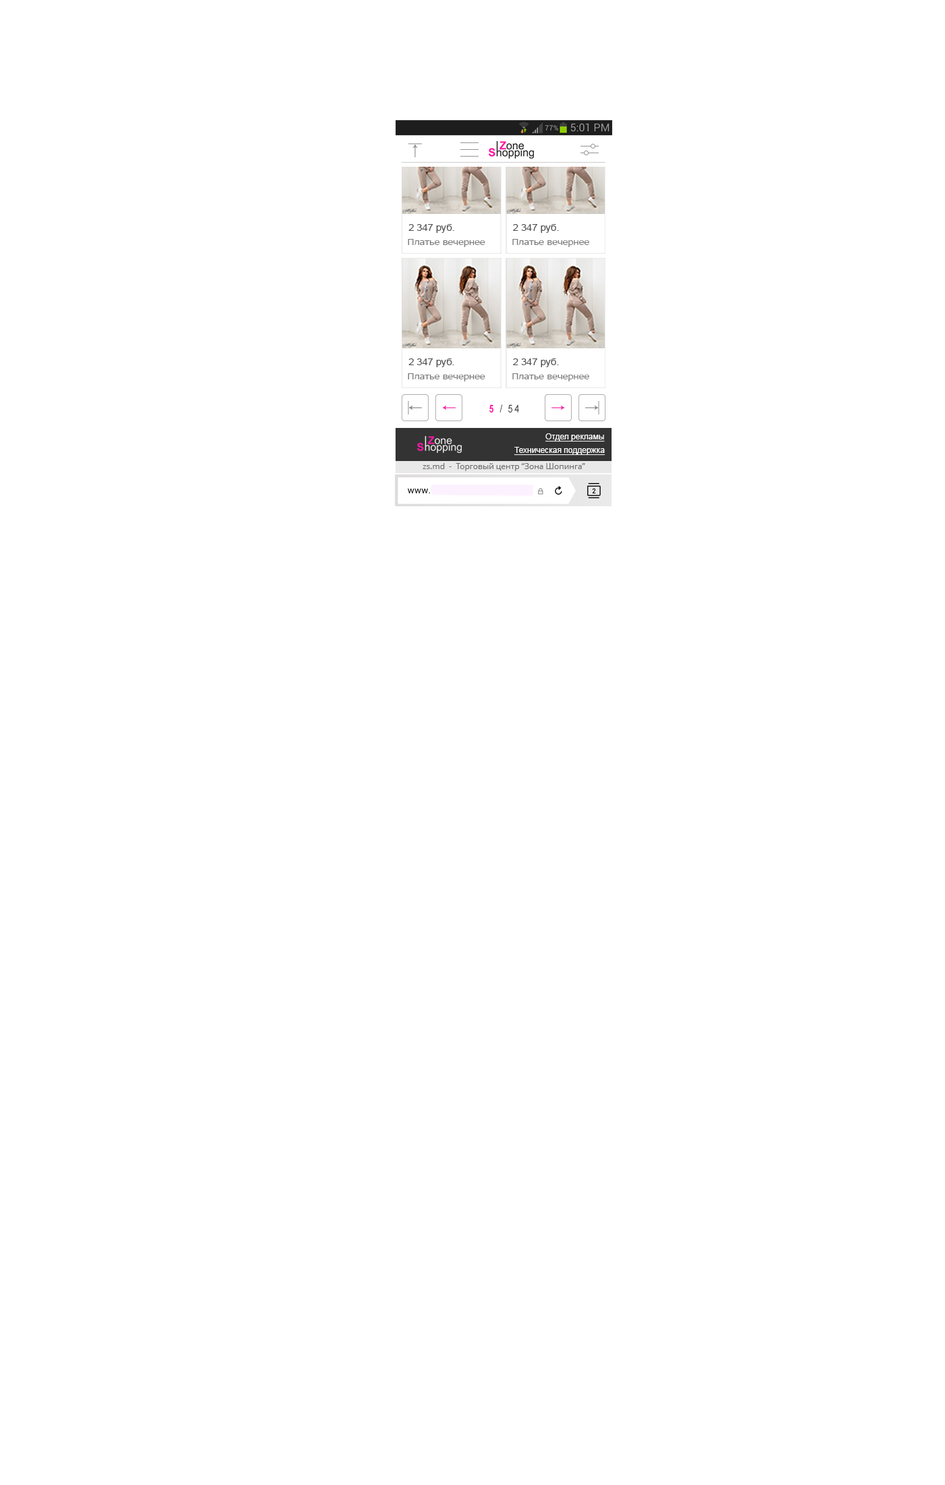
<style>
.page{position:relative;width:945px;height:1485px;background:#ffffff}
.page>*{position:absolute;margin:0}
.t1{font:9px "ArialMT";color:#515151;scale:1.1 1}
.t2{font:9px "Tahoma";color:#7a7a7a;scale:1.1 1}
.t3{font:10.8px "ArialMT";letter-spacing:0.2em;color:#444444;scale:0.8 1}
.t4{font:10.8px "Arial-BoldMT";letter-spacing:0.2em;color:#fe19a8;scale:0.8 1}
.t5{font:8.1px "ArialMT";color:#fefefe;text-decoration:underline}
.t6{font:8.1px "OpenSans";color:#6e6e6e}
</style>
<div class="page">
<p class="t1" style="left:408px;top:224px;width:46px;height:9px">2 347 руб.</p>
<p class="t1" style="left:513px;top:224px;width:46px;height:9px">2 347 руб.</p>
<p class="t2" style="left:408px;top:239px;width:77px;height:8px">Платье вечернее</p>
<p class="t2" style="left:512px;top:239px;width:77px;height:8px">Платье вечернее</p>
<p class="t1" style="left:408px;top:358px;width:46px;height:9px">2 347 руб.</p>
<p class="t1" style="left:513px;top:358px;width:46px;height:9px">2 347 руб.</p>
<p class="t2" style="left:408px;top:373px;width:77px;height:8px">Платье вечернее</p>
<p class="t2" style="left:512px;top:373px;width:77px;height:8px">Платье вечернее</p>
<p class="t3" style="left:489px;top:404px;width:30px;height:9px"><span class="t4">5</span> / 54</p>
<p class="t5" style="left:545px;top:433px;width:60px;height:9px">Отдел рекламы</p>
<p class="t5" style="left:514px;top:447px;width:91px;height:9px">Техническая поддержка</p>
<p class="t6" style="left:422px;top:463px;width:163px;height:8px">zs.md  -  Торговый центр “Зона Шопинга”</p>
</div>
